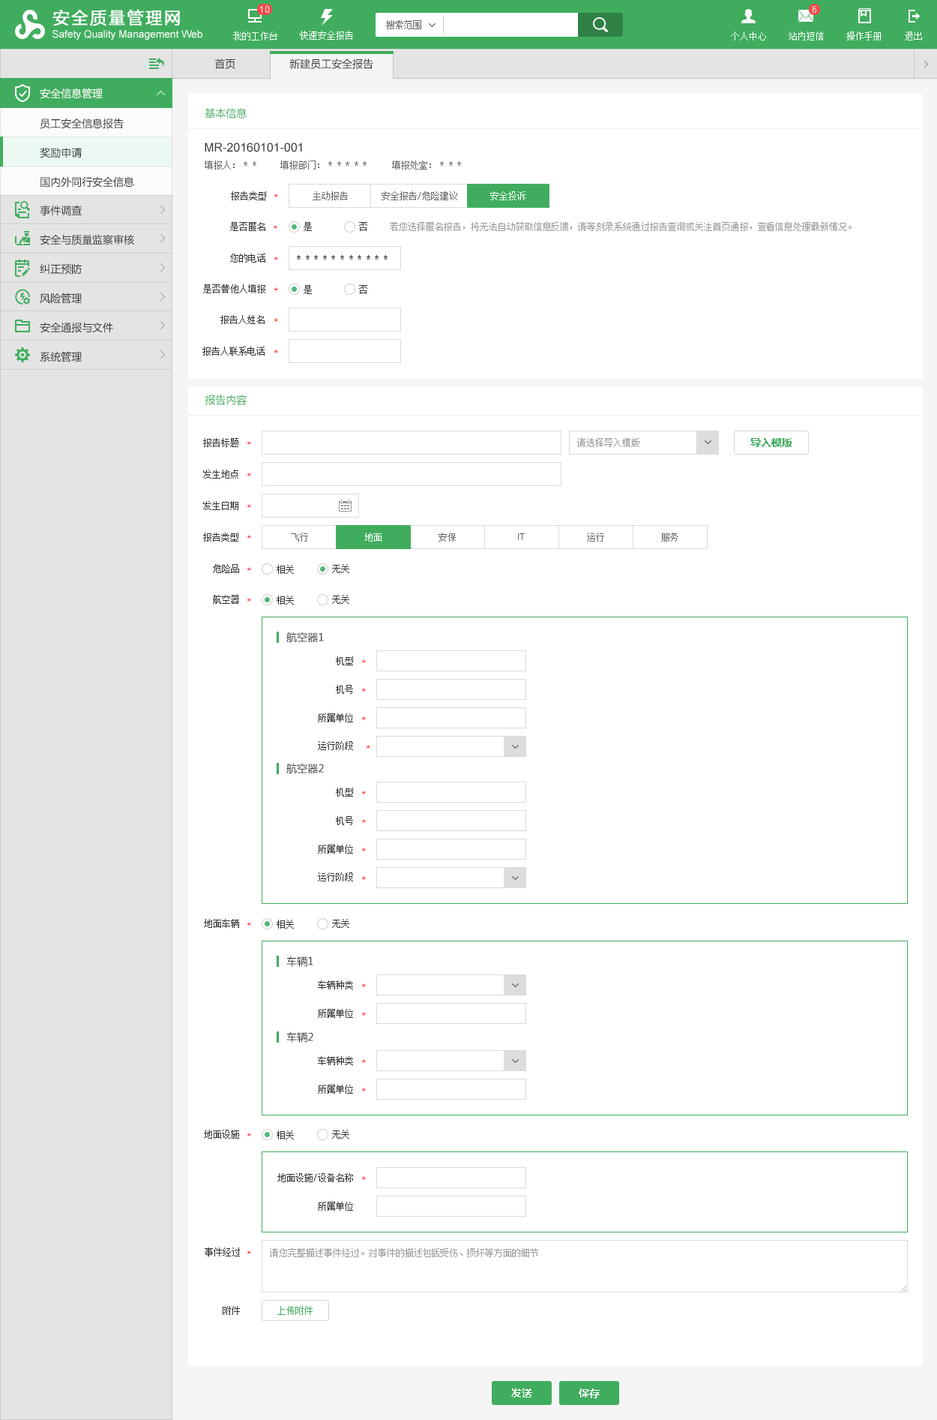
<style>
.page{position:relative;width:937px;height:1420px;background:#ffffff}
.page>*{position:absolute;margin:0}
.t1{font:10.5px "MicrosoftYaHei";color:#333333}
.t2{font:10.5px "MicrosoftYaHei";color:#ffffff}
.t3{font:10.5px "MicrosoftYaHei";color:#40ad5e}
.t4{font:10.5px/29.2px "MicrosoftYaHei";color:#333333}
.t5{font:12px "ArialMT";color:#333333}
.t6{font:9px "SimSun";color:#666666}
.t7{font:9px "AdobeSongStd-Light";letter-spacing:-0.05em;color:#666666}
.t8{font:9px "SimSun";color:#333333}
.t9{font:12px "AppleSymbols";color:#ff0000}
.t10{font:9px "SimSun";color:#ffffff}
.t11{font:9px "SimSun";color:#999999}
.t12{font:9px "AdobeSongStd-Light";letter-spacing:-0.05em;color:#333333}
.t13{font:10.5px "MicrosoftYaHei-Bold";color:#40ad5e}
.t14{font:9px "ArialMT";color:#666666}
.t15{font:9px "SimSun";color:#40ad5e}
.t16{font:10.5px "MicrosoftYaHei-Bold";color:#ffffff}
</style>
<div class="page">
<p class="t1" style="left:214px;top:58px;width:21px;height:11px">首页</p>
<p class="t1" style="left:289px;top:58px;width:84px;height:11px">新建员工安全报告</p>
<p class="t2" style="left:40px;top:88px;width:63px;height:11px">安全信息管理</p>
<p class="t3" style="left:205px;top:108px;width:42px;height:10px">基本信息</p>
<p class="t4" style="left:40px;top:118px;width:94px;height:69px">员工安全信息报告<br>奖励申请<br>国内外同行安全信息</p>
<p class="t5" style="left:205px;top:142px;width:97px;height:10px">MR-20160101-001</p>
<p class="t6" style="left:205px;top:160px;width:51px;height:9px">填报人：<span class="t7">＊＊</span></p>
<p class="t6" style="left:280px;top:160px;width:87px;height:9px">填报部门：<span class="t7">＊＊＊＊＊</span></p>
<p class="t6" style="left:392px;top:160px;width:69px;height:9px">填报处室：<span class="t7">＊＊＊</span></p>
<p class="t8" style="left:231px;top:191px;width:35px;height:9px">报告类型</p>
<p class="t9" style="left:274px;top:193px;width:5px;height:4px">＊</p>
<p class="t6" style="left:313px;top:191px;width:35px;height:9px">主动报告</p>
<p class="t6" style="left:382px;top:191px;width:75px;height:9px">安全报告/危险建议</p>
<p class="t10" style="left:490px;top:191px;width:36px;height:9px">安全投诉</p>
<p class="t4" style="left:40px;top:205px;width:94px;height:157px">事件调查<br>安全与质量监察审核<br>纠正预防<br>风险管理<br>安全通报与文件<br>系统管理</p>
<p class="t8" style="left:230px;top:222px;width:35px;height:9px">是否匿名</p>
<p class="t8" style="left:304px;top:222px;width:8px;height:9px">是</p>
<p class="t8" style="left:359px;top:222px;width:8px;height:9px">否</p>
<p class="t11" style="left:390px;top:222px;width:462px;height:9px">若您选择匿名报告，将无法自动获取信息反馈，请等刻录系统通过报告查询或关注首页通报，查看信息处理最新情况。</p>
<p class="t9" style="left:273px;top:225px;width:5px;height:4px">＊</p>
<p class="t8" style="left:230px;top:253px;width:35px;height:9px">您的电话</p>
<p class="t9" style="left:274px;top:256px;width:5px;height:4px">＊</p>
<p class="t12" style="left:297px;top:255px;width:91px;height:4px">＊＊＊＊＊＊＊＊＊＊＊</p>
<p class="t8" style="left:203px;top:284px;width:62px;height:9px">是否替他人填报</p>
<p class="t9" style="left:274px;top:287px;width:5px;height:4px">＊</p>
<p class="t8" style="left:304px;top:285px;width:8px;height:9px">是</p>
<p class="t8" style="left:359px;top:285px;width:8px;height:9px">否</p>
<p class="t8" style="left:220px;top:315px;width:45px;height:9px">报告人姓名</p>
<p class="t9" style="left:274px;top:318px;width:5px;height:4px">＊</p>
<p class="t8" style="left:202px;top:346px;width:63px;height:9px">报告人联系电话</p>
<p class="t9" style="left:274px;top:349px;width:5px;height:4px">＊</p>
<p class="t3" style="left:205px;top:394px;width:42px;height:11px">报告内容</p>
<p class="t8" style="left:203px;top:438px;width:35px;height:9px">报告标题</p>
<p class="t11" style="left:577px;top:438px;width:63px;height:9px">请选择导入模版</p>
<p class="t13" style="left:751px;top:438px;width:41px;height:9px">导入模版</p>
<p class="t9" style="left:247px;top:441px;width:5px;height:4px">＊</p>
<p class="t8" style="left:203px;top:469px;width:35px;height:9px">发生地点</p>
<p class="t9" style="left:247px;top:472px;width:5px;height:4px">＊</p>
<p class="t8" style="left:203px;top:501px;width:35px;height:9px">发生日期</p>
<p class="t9" style="left:247px;top:504px;width:5px;height:4px">＊</p>
<p class="t8" style="left:203px;top:532px;width:35px;height:9px">报告类型</p>
<p class="t6" style="left:291px;top:532px;width:17px;height:9px">飞行</p>
<p class="t10" style="left:364px;top:532px;width:18px;height:9px">地面</p>
<p class="t6" style="left:439px;top:532px;width:17px;height:9px">安保</p>
<p class="t14" style="left:518px;top:533px;width:7px;height:7px">IT</p>
<p class="t6" style="left:587px;top:532px;width:17px;height:9px">运行</p>
<p class="t6" style="left:661px;top:532px;width:18px;height:9px">服务</p>
<p class="t9" style="left:247px;top:535px;width:5px;height:3px">＊</p>
<p class="t8" style="left:213px;top:564px;width:26px;height:9px">危险品</p>
<p class="t9" style="left:247px;top:567px;width:5px;height:4px">＊</p>
<p class="t8" style="left:277px;top:565px;width:17px;height:9px">相关</p>
<p class="t8" style="left:332px;top:564px;width:17px;height:9px">无关</p>
<p class="t8" style="left:213px;top:595px;width:26px;height:9px">航空器</p>
<p class="t9" style="left:247px;top:598px;width:5px;height:3px">＊</p>
<p class="t8" style="left:277px;top:595px;width:17px;height:9px">相关</p>
<p class="t8" style="left:332px;top:595px;width:17px;height:9px">无关</p>
<p class="t1" style="left:286px;top:631px;width:38px;height:12px">航空器1</p>
<p class="t8" style="left:336px;top:656px;width:17px;height:9px">机型</p>
<p class="t9" style="left:361px;top:659px;width:6px;height:4px">＊</p>
<p class="t8" style="left:336px;top:685px;width:17px;height:9px">机号</p>
<p class="t9" style="left:361px;top:688px;width:6px;height:3px">＊</p>
<p class="t8" style="left:318px;top:713px;width:35px;height:9px">所属单位</p>
<p class="t9" style="left:361px;top:716px;width:6px;height:4px">＊</p>
<p class="t8" style="left:318px;top:741px;width:35px;height:9px">运行阶段</p>
<p class="t9" style="left:366px;top:745px;width:5px;height:3px">＊</p>
<p class="t1" style="left:286px;top:763px;width:38px;height:11px">航空器2</p>
<p class="t8" style="left:336px;top:787px;width:17px;height:9px">机型</p>
<p class="t9" style="left:361px;top:790px;width:6px;height:4px">＊</p>
<p class="t8" style="left:336px;top:816px;width:17px;height:9px">机号</p>
<p class="t9" style="left:361px;top:819px;width:6px;height:4px">＊</p>
<p class="t8" style="left:318px;top:844px;width:35px;height:9px">所属单位</p>
<p class="t9" style="left:361px;top:847px;width:6px;height:4px">＊</p>
<p class="t8" style="left:318px;top:872px;width:35px;height:9px">运行阶段</p>
<p class="t9" style="left:361px;top:876px;width:6px;height:4px">＊</p>
<p class="t8" style="left:204px;top:919px;width:35px;height:9px">地面车辆</p>
<p class="t9" style="left:247px;top:922px;width:5px;height:3px">＊</p>
<p class="t8" style="left:277px;top:919px;width:17px;height:9px">相关</p>
<p class="t8" style="left:332px;top:919px;width:17px;height:9px">无关</p>
<p class="t1" style="left:286px;top:955px;width:27px;height:12px">车辆1</p>
<p class="t8" style="left:318px;top:980px;width:35px;height:9px">车辆种类</p>
<p class="t9" style="left:361px;top:983px;width:6px;height:4px">＊</p>
<p class="t8" style="left:318px;top:1009px;width:35px;height:9px">所属单位</p>
<p class="t9" style="left:361px;top:1012px;width:6px;height:3px">＊</p>
<p class="t1" style="left:286px;top:1031px;width:27px;height:11px">车辆2</p>
<p class="t8" style="left:318px;top:1056px;width:35px;height:9px">车辆种类</p>
<p class="t9" style="left:361px;top:1059px;width:6px;height:4px">＊</p>
<p class="t8" style="left:318px;top:1084px;width:35px;height:9px">所属单位</p>
<p class="t9" style="left:361px;top:1087px;width:6px;height:4px">＊</p>
<p class="t8" style="left:204px;top:1129px;width:35px;height:9px">地面设施</p>
<p class="t9" style="left:247px;top:1132px;width:5px;height:4px">＊</p>
<p class="t8" style="left:277px;top:1130px;width:17px;height:9px">相关</p>
<p class="t8" style="left:332px;top:1129px;width:17px;height:9px">无关</p>
<p class="t8" style="left:277px;top:1173px;width:76px;height:9px">地面设施/设备名称</p>
<p class="t9" style="left:361px;top:1176px;width:6px;height:4px">＊</p>
<p class="t8" style="left:318px;top:1201px;width:35px;height:9px">所属单位</p>
<p class="t8" style="left:205px;top:1247px;width:35px;height:9px">事件经过</p>
<p class="t9" style="left:247px;top:1250px;width:5px;height:4px">＊</p>
<p class="t11" style="left:270px;top:1248px;width:268px;height:9px">请您完整描述事件经过。对事件的描述包括受伤、损坏等方面的细节</p>
<p class="t8" style="left:223px;top:1306px;width:17px;height:9px">附件</p>
<p class="t15" style="left:277px;top:1306px;width:36px;height:9px">上传附件</p>
<p class="t16" style="left:511px;top:1388px;width:21px;height:9px">发送</p>
<p class="t16" style="left:579px;top:1388px;width:21px;height:10px">保存</p>
</div>
